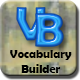
<style>
.page{position:relative;width:80px;height:80px}
.page>*{position:absolute;margin:0}
.t1{font:12px "BerlinSansFBDemi-Bold";color:#000000}
</style>
<div class="page">
<p class="t1" style="left:10px;top:50px;width:62px;height:23px;text-align:center">Vocabulary<br>Builder</p>
</div>
